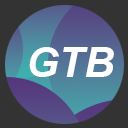
<style>
.page{position:relative;width:128px;height:128px;background:#333333}
.page>*{position:absolute;margin:0}
.t1{font:41.7px "Arial-BoldItalicMT";color:#ffffff}
</style>
<div class="page">
<p class="t1" style="left:29px;top:47px;width:85px;height:30px">GTB</p>
</div>
